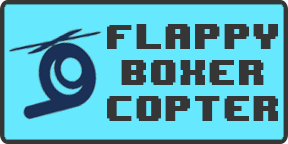
<style>
.page{position:relative;width:288px;height:144px;background:#66e8ff}
.page>*{position:absolute;margin:0}
.t1{font:29.8px "8BITWONDERNominal";color:#363636}
</style>
<div class="page">
<p class="t1" style="left:107px;top:24px;width:171px;height:97px;text-align:center">Flappy<br>boxer<br>copter</p>
</div>
